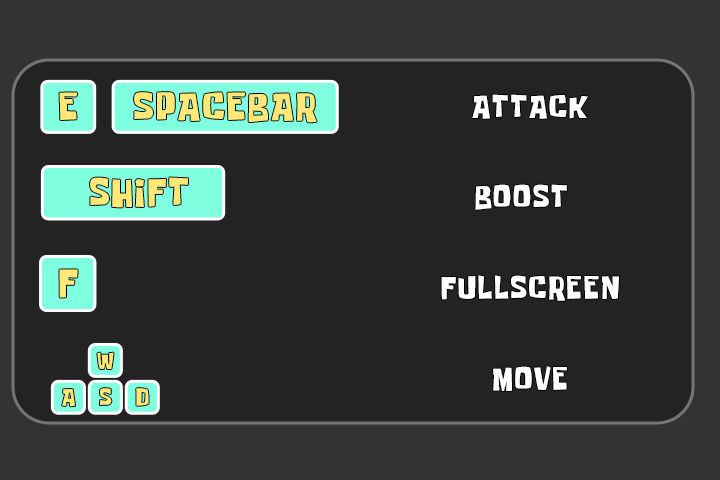
<style>
.page{position:relative;width:720px;height:480px;background:#232323}
.page>*{position:absolute;margin:0}
.t1{font:29.9px "SpongeboyMeBob";letter-spacing:0.08em;color:#ffe878;text-transform:uppercase;font-weight:bold;scale:1.03 1}
.t2{font:25px "SpongeboyMeBob";letter-spacing:0.08em;color:#ffffff;text-transform:uppercase;font-weight:bold}
.t3{font:30.7px "SpongeboyMeBob";letter-spacing:0.08em;color:#ffe878;text-transform:uppercase;font-weight:bold}
.t4{font:31.6px "SpongeboyMeBob";letter-spacing:0.08em;color:#ffe878;text-transform:uppercase;font-weight:bold}
.t5{font:18.7px "SpongeboyMeBob";letter-spacing:0.08em;color:#ffe878;text-transform:uppercase;font-weight:bold}
</style>
<div class="page">
<p class="t1" style="left:59px;top:92px;width:18px;height:28px">e</p>
<p class="t1" style="left:134px;top:92px;width:183px;height:31px">Spacebar</p>
<p class="t2" style="left:472px;top:94px;width:116px;height:25px">attack</p>
<p class="t3" style="left:90px;top:177px;width:98px;height:31px">shift</p>
<p class="t2" style="left:475px;top:184px;width:92px;height:26px">boost</p>
<p class="t4" style="left:59px;top:269px;width:19px;height:29px">f</p>
<p class="t2" style="left:441px;top:275px;width:178px;height:26px">fullscreen</p>
<p class="t5" style="left:97px;top:352px;width:17px;height:17px">w</p>
<p class="t2" style="left:493px;top:366px;width:74px;height:25px">move</p>
<p class="t5" style="left:62px;top:389px;width:13px;height:18px">a</p>
<p class="t5" style="left:100px;top:388px;width:12px;height:17px">s</p>
<p class="t5" style="left:136px;top:388px;width:13px;height:18px">d</p>
</div>
